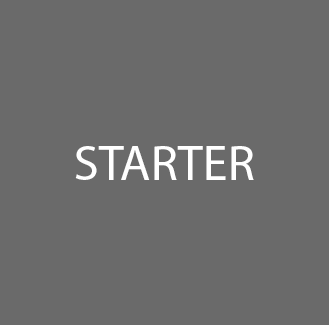
<style>
.page{position:relative;width:329px;height:325px;background:#6a6a6a}
.page>*{position:absolute;margin:0}
.t1{font:50px "MyriadPro-Regular";color:#ffffff}
</style>
<div class="page">
<p class="t1" style="left:75px;top:146px;width:179px;height:34px">STARTER</p>
</div>
